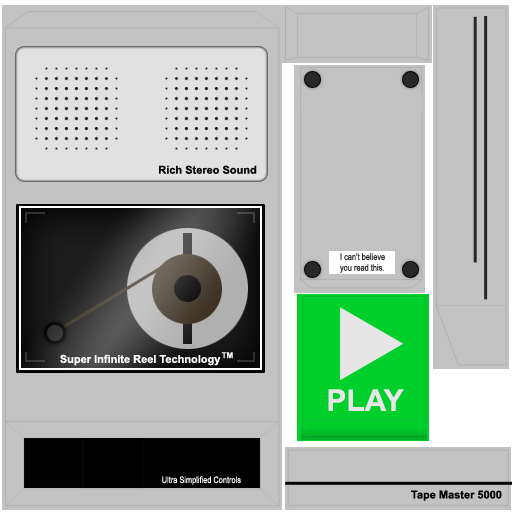
<style>
.page{position:relative;width:512px;height:512px;background:#c2c2c2}
.page>*{position:absolute;margin:0}
.t1{font:11px "Arial-BoldMT";color:#050505}
.t2{font:9px "ArialNarrow";color:#282828}
.t3{font:8px "Arial-BoldMT";color:#ffffff}
.t4{font:11px "Arial-BoldMT";color:#ffffff}
.t5{font:30px "Arial-BoldMT";color:#e6e6e6}
.t6{font:9px "ArialNarrow";color:#ffffff}
</style>
<div class="page">
<p class="t1" style="left:159px;top:165px;width:98px;height:9px">Rich Stereo Sound</p>
<p class="t2" style="left:340px;top:253px;width:45px;height:20px">I can’t believe <br>you read this.</p>
<p class="t3" style="left:221px;top:352px;width:12px;height:7px">TM</p>
<p class="t4" style="left:60px;top:354px;width:161px;height:12px">Super Infinite Reel Technology</p>
<p class="t5" style="left:328px;top:389px;width:76px;height:22px">PLAY</p>
<p class="t6" style="left:162px;top:476px;width:79px;height:9px">Ultra Simplified Controls</p>
<p class="t1" style="left:411px;top:490px;width:91px;height:11px">Tape Master 5000</p>
</div>
